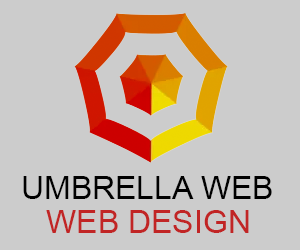
<style>
.page{position:relative;width:300px;height:250px;background:#cccccc}
.page>*{position:absolute;margin:0}
.t1{font:32px "ArialMT";color:#000000;text-transform:uppercase}
.t2{font:32px "ArialMT";color:#c12525;text-transform:uppercase}
</style>
<div class="page">
<p class="t1" style="left:23px;top:176px;width:249px;height:23px">Umbrella WEB</p>
<p class="t2" style="left:46px;top:210px;width:203px;height:23px">WEB DESIGN</p>
</div>
